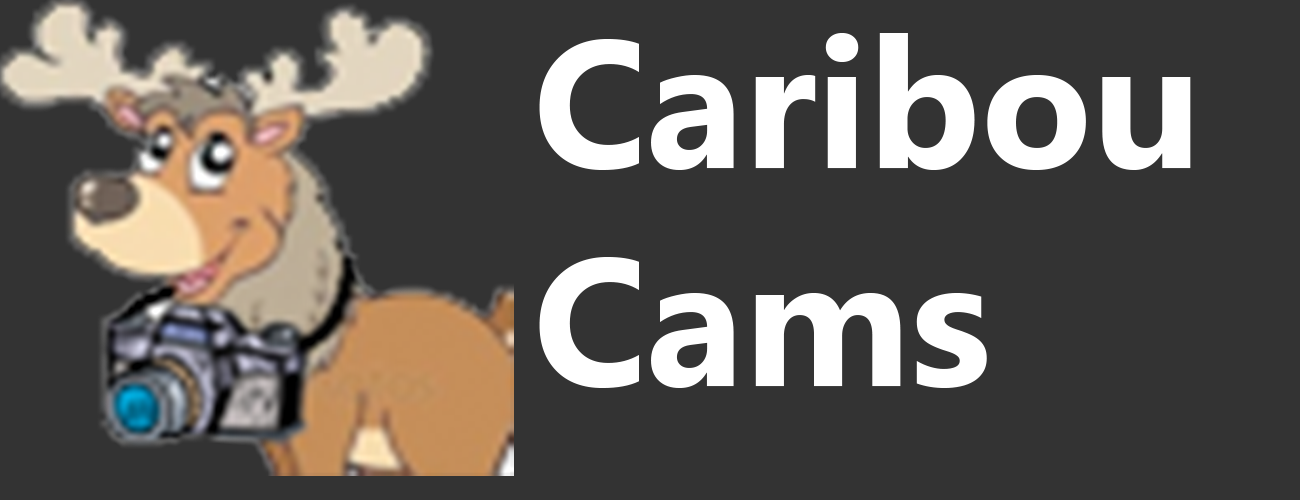
<style>
.page{position:relative;width:1300px;height:500px;background:#333333}
.page>*{position:absolute;margin:0}
.t1{font:182px "MicrosoftNewTaiLue-Bold";color:#ffffff}
</style>
<div class="page">
<p class="t1" style="left:539px;top:33px;width:652px;height:355px;text-align:justify">Caribou<br>Cams</p>
</div>
